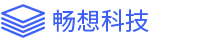
<style>
.page{position:relative;width:200px;height:40px;background:#ffffff}
.page>*{position:absolute;margin:0}
.t1{font:24.2px "SourceHanSansCN-Regular";letter-spacing:0.005em;color:#3d60f4}
</style>
<div class="page">
<p class="t1" style="left:53px;top:9px;width:96px;height:24px">畅想科技</p>
</div>
